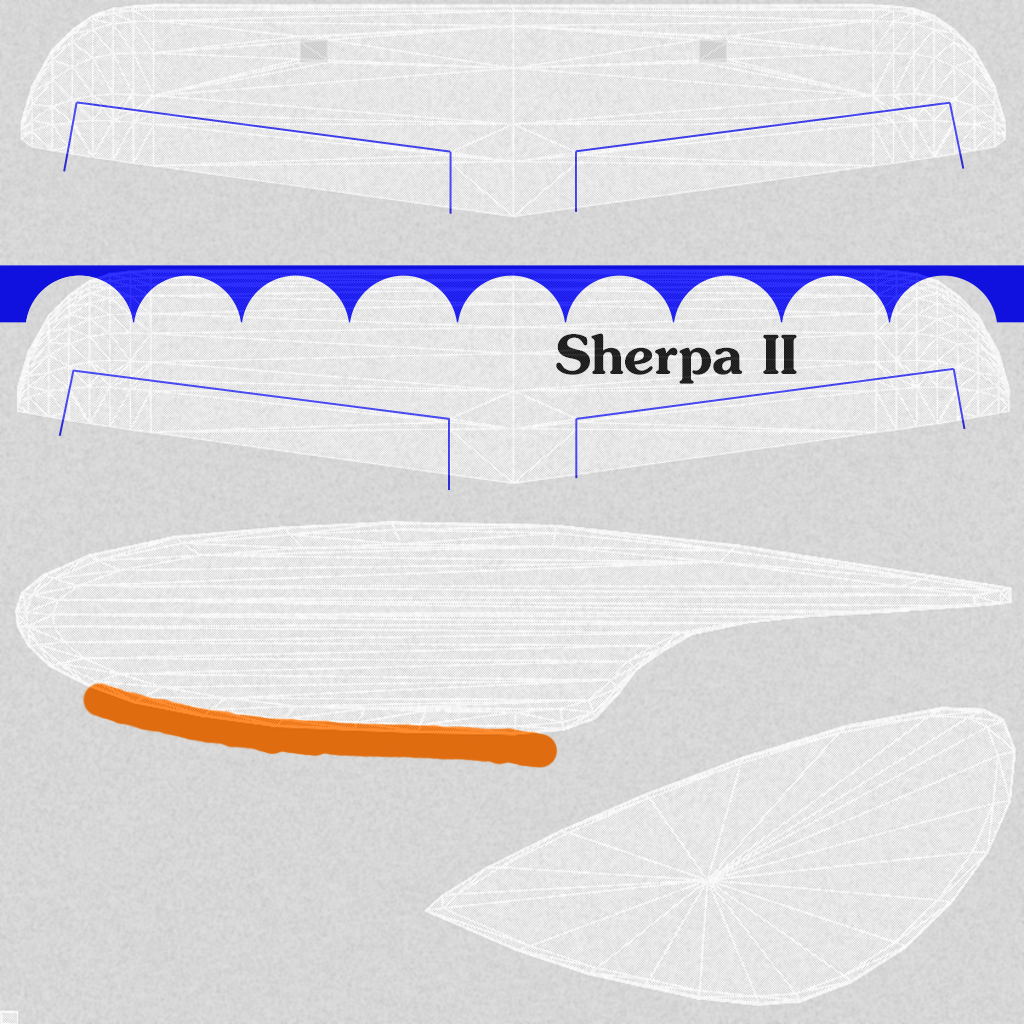
<style>
.page{position:relative;width:1024px;height:1024px}
.page>*{position:absolute;margin:0}
.t1{font:87.7px "JasmineUPCBold";color:#222222}
</style>
<div class="page">
<p class="t1" style="left:556px;top:333px;width:241px;height:51px">Sherpa II</p>
</div>
